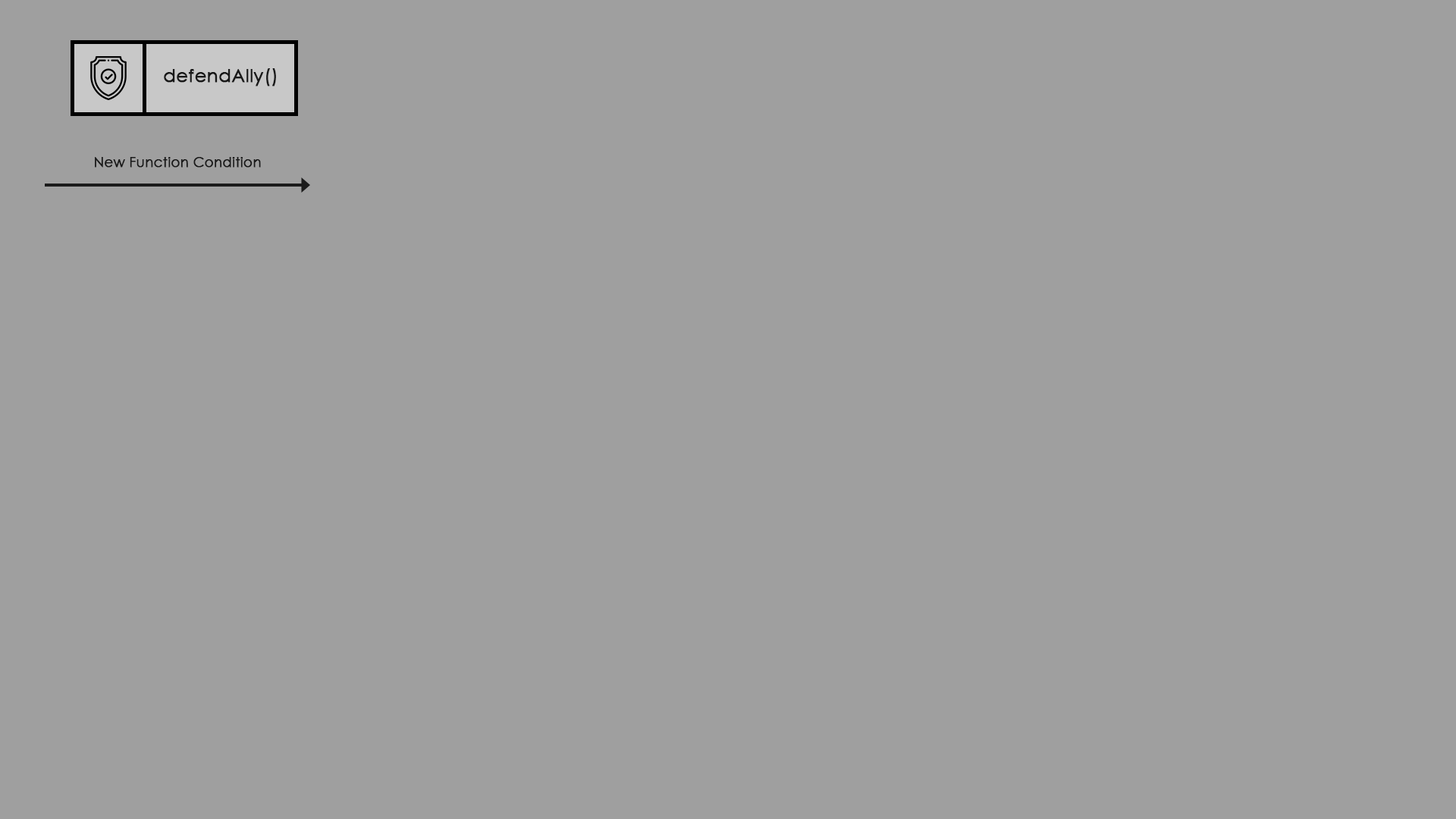
<style>
.page{position:relative;width:1456px;height:819px;background:#9f9f9f}
.page>*{position:absolute;margin:0}
.t1{font:18.2px "CenturyGothic";color:#181818;font-weight:bold}
.t2{font:13.6px "CenturyGothic";color:#181818;font-weight:bold}
</style>
<div class="page">
<p class="t1" style="left:164px;top:68px;width:112px;height:18px">defendAlly()</p>
<p class="t2" style="left:95px;top:157px;width:166px;height:11px">New Function Condition</p>
</div>
